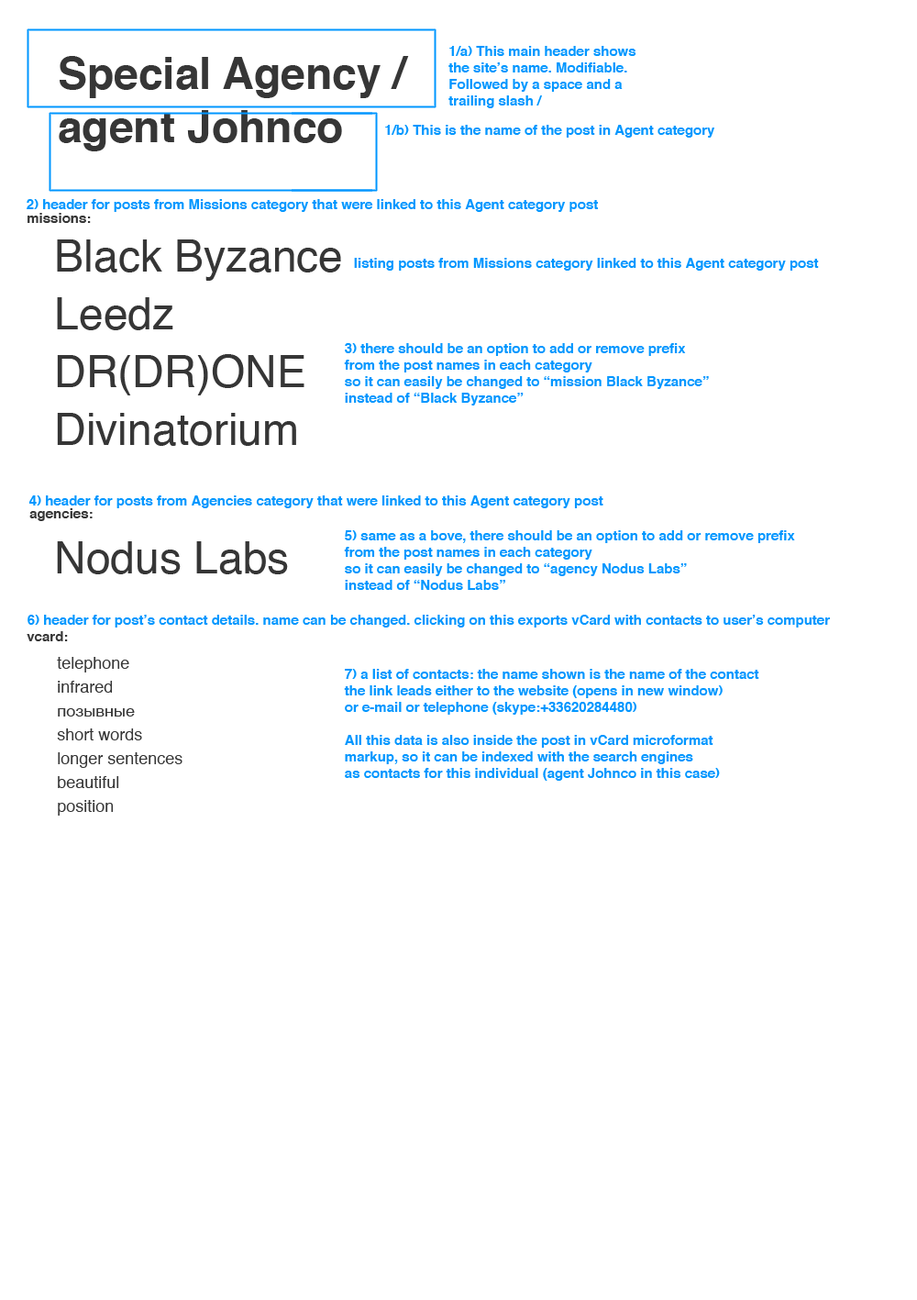
<style>
.page{position:relative;width:917px;height:1300px;background:#ffffff}
.page>*{position:absolute;margin:0}
.t1{font:13.8px "Helvetica-Bold";color:#0096ff}
.t2{font:44px "Helvetica-Bold";color:#363636}
.t3{font:13.8px "Helvetica-Bold";color:#363636}
.t4{font:44px/57.8px "Helvetica";color:#363636}
.t5{font:44px "Helvetica";color:#363636}
.t6{font:16.5px/23.9px "Helvetica";color:#363636}
</style>
<div class="page">
<p class="t1" style="left:449px;top:46px;width:188px;height:62px">1/a) This main header shows the site’s name. Modifiable. Followed by a space and a trailing slash /</p>
<p class="t2" style="left:59px;top:56px;width:350px;height:95px">Special Agency /<br>agent Johnco</p>
<p class="t1" style="left:385px;top:125px;width:330px;height:13px">1/b) This is the name of the post in Agent category</p>
<p class="t1" style="left:27px;top:199px;width:571px;height:13px">2) header for posts from Missions category that were linked to this Agent category post</p>
<p class="t3" style="left:28px;top:213px;width:63px;height:10px">missions:</p>
<p class="t4" style="left:57px;top:239px;width:284px;height:207px">Black Byzance<br>Leedz<br>DR(DR)ONE<br>Divinatorium</p>
<p class="t1" style="left:354px;top:258px;width:465px;height:13px">listing posts from Missions category linked to this Agent category post</p>
<p class="t1" style="left:344px;top:343px;width:365px;height:62px">3) there should be an option to add or remove prefix<br>from the post names in each category<br>so it can easily be changed to “mission Black Byzance”<br>instead of “Black Byzance”</p>
<p class="t1" style="left:28px;top:495px;width:576px;height:13px">4) header for posts from Agencies category that were linked to this Agent category post</p>
<p class="t3" style="left:29px;top:508px;width:64px;height:13px">agencies:</p>
<p class="t1" style="left:344px;top:530px;width:451px;height:60px">5) same as a bove, there should be an option to add or remove prefix<br>from the post names in each category<br>so it can easily be changed to “agency Nodus Labs”<br>instead of “Nodus Labs”</p>
<p class="t5" style="left:57px;top:541px;width:231px;height:33px">Nodus Labs</p>
<p class="t1" style="left:28px;top:615px;width:802px;height:12px">6) header for post’s contact details. name can be changed. clicking on this exports vCard with contacts to user’s computer</p>
<p class="t3" style="left:27px;top:631px;width:41px;height:10px">vcard:</p>
<p class="t6" style="left:57px;top:657px;width:126px;height:159px">telephone<br>infrared<br>позывные<br>short words<br>longer sentences<br>beautiful<br>position</p>
<p class="t1" style="left:344px;top:669px;width:416px;height:112px">7) a list of contacts: the name shown is the name of the contact<br>the link leads either to the website (opens in new window)<br>or e-mail or telephone (skype:+33620284480)<br><br>All this data is also inside the post in vCard microformat <br>markup, so it can be indexed with the search engines<br>as contacts for this individual (agent Johnco in this case)</p>
</div>
